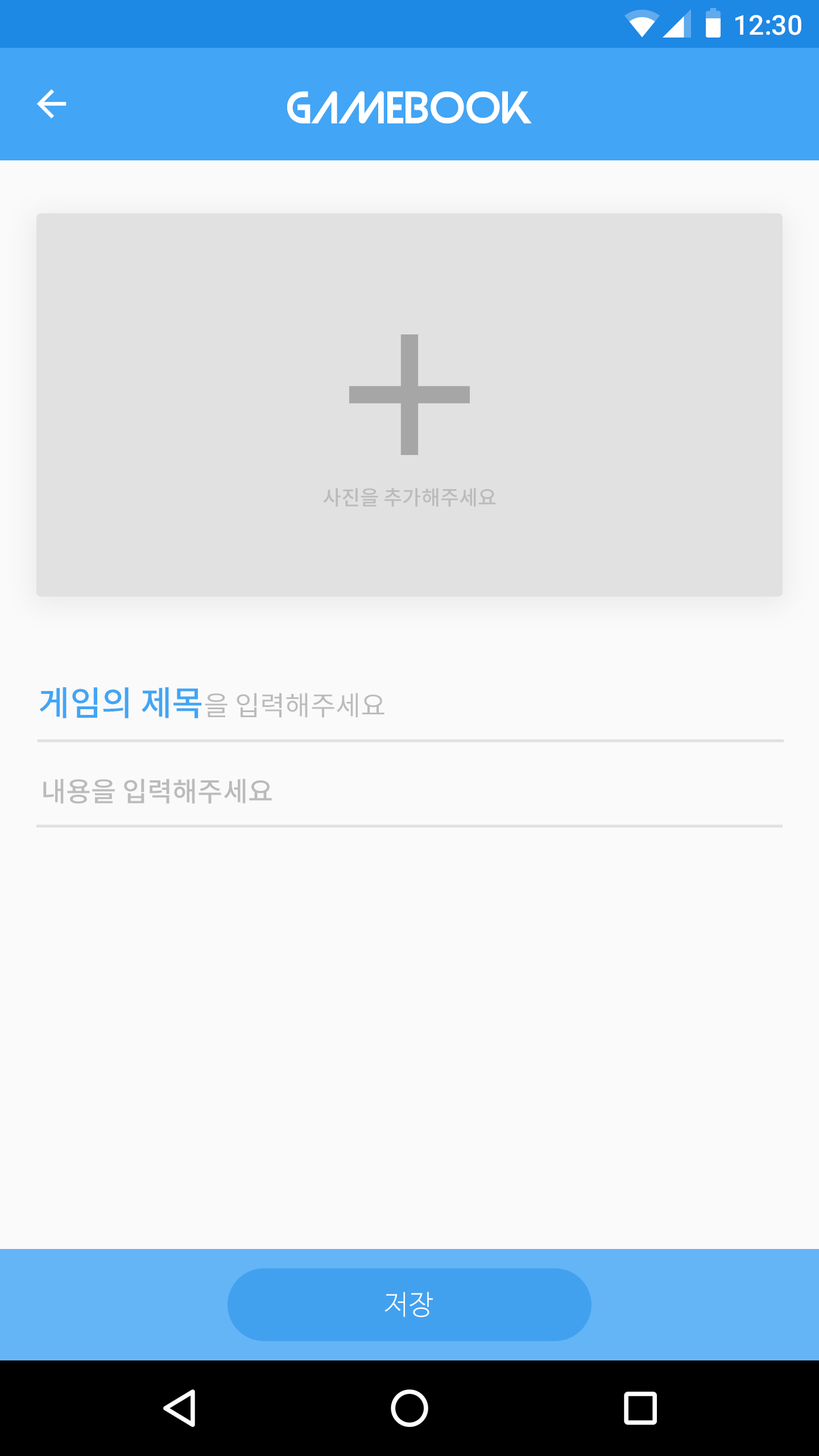
<style>
.page{position:relative;width:819px;height:1456px;background:#fafafa}
.page>*{position:absolute;margin:0}
.t1{font:27.3px "Roboto-Medium";color:#ffffff}
.t2{font:40.9px "Strasua-Regular";color:#ffffff}
.t3{font:20.5px "NotoSansCJKkr-Medium";color:#bbbbbb}
.t4{font:27.3px "NotoSansCJKkr-Regular";color:#bbbbbb}
.t5{font:34.1px "NotoSansCJKkr-Medium";color:#42a5f5}
.t6{font:27.2px "NotoSansCJKkr-Medium";color:#bbbbbb}
.t7{font:27.3px "NanumBarunGothicLight";letter-spacing:0.025em;color:#ffffff}
</style>
<div class="page">
<p class="t1" style="left:735px;top:15px;width:66px;height:20px">12:30</p>
<p class="t2" style="left:287px;top:91px;width:245px;height:33px">GaMEBook</p>
<p class="t3" style="left:323px;top:488px;width:173px;height:19px">사진을 추가해주세요</p>
<p class="t4" style="left:39px;top:687px;width:345px;height:31px"><span class="t5">게임의 제목</span>을 입력해주세요</p>
<p class="t6" style="left:43px;top:779px;width:229px;height:25px">내용을 입력해주세요</p>
<p class="t7" style="left:384px;top:1292px;width:49px;height:25px">저장</p>
</div>
